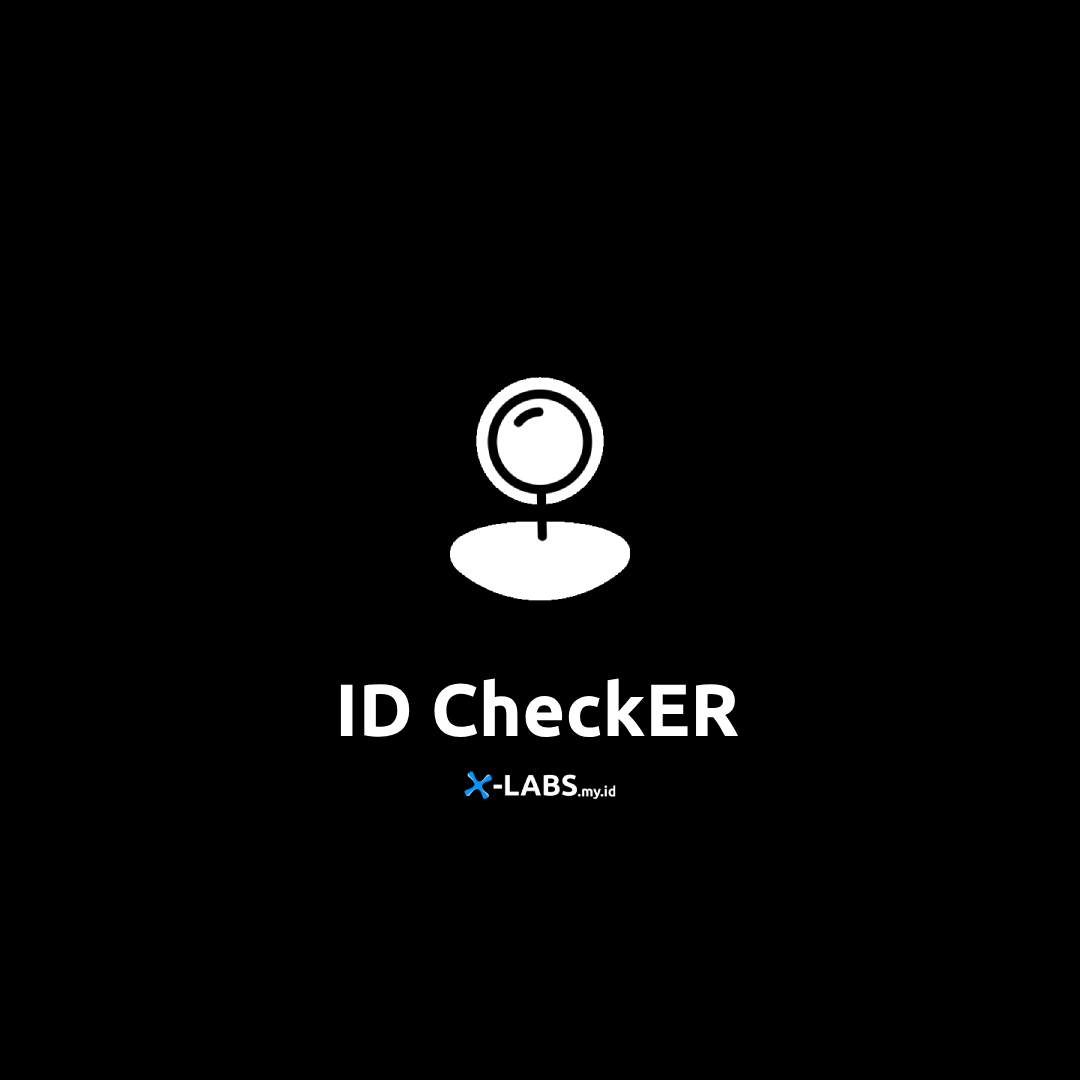
<style>
.page{position:relative;width:1080px;height:1080px;background:#000000}
.page>*{position:absolute;margin:0}
.t1{font:74px "Ubuntu-Bold";color:#ffffff}
</style>
<div class="page">
<p class="t1" style="left:340px;top:678px;width:399px;height:60px">ID CheckER</p>
</div>
